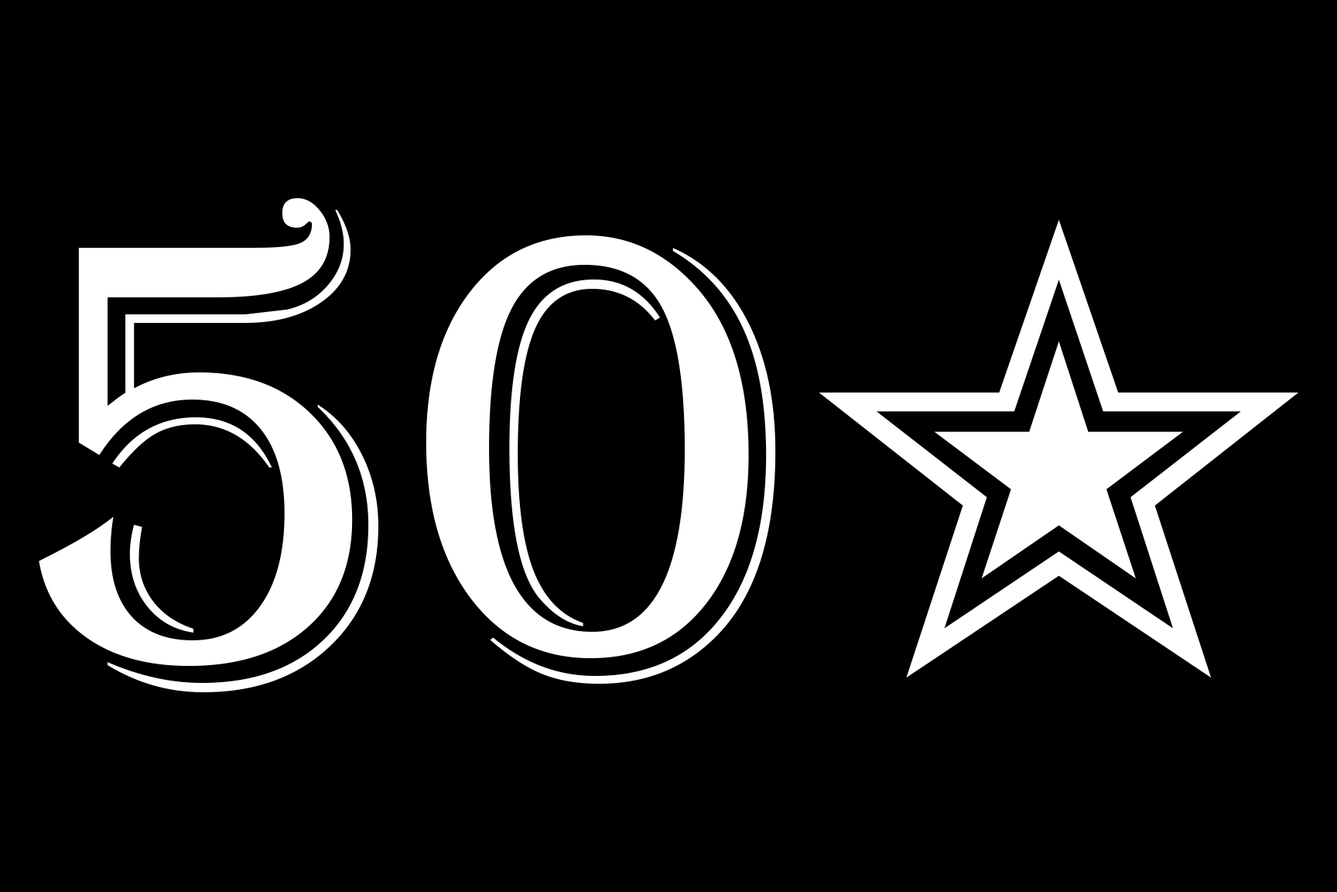
<style>
.page{position:relative;width:1337px;height:892px;background:#000000}
.page>*{position:absolute;margin:0}
.t1{font:653px "Algerian";color:#ffffff}
.t2{font:653px "SegoeUISymbol";color:#ffffff}
</style>
<div class="page">
<p class="t1" style="left:39px;top:198px;width:1260px;height:494px">50<span class="t2">✭</span></p>
</div>
